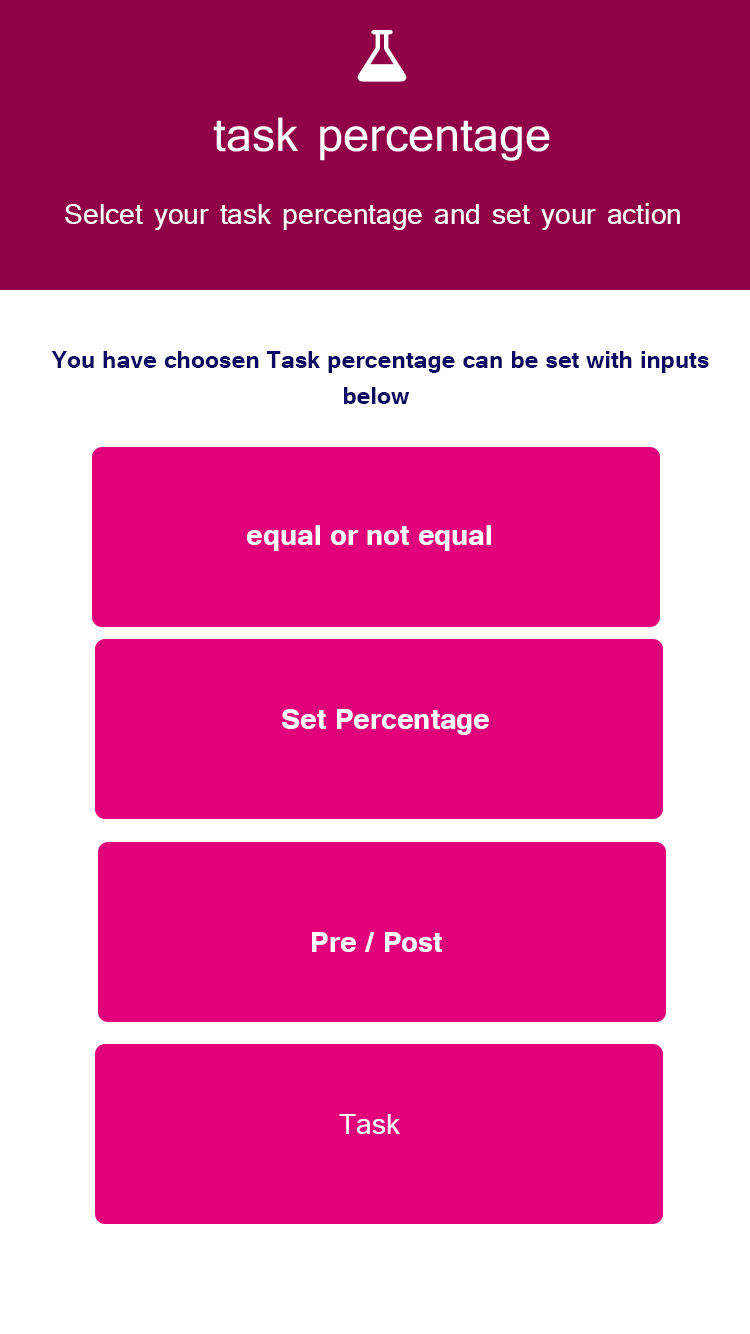
<style>
.page{position:relative;width:750px;height:1334px;background:#e3007b}
.page>*{position:absolute;margin:0}
.t1{font:36px "Tunga";color:#ffffff}
.t2{font:30px "Tunga-Bold";color:#0d0960}
.t3{font:36px "Tunga-Bold";color:#ffffff}
</style>
<div class="page">
<p class="t1" style="left:65px;top:203px;width:615px;height:27px">Selcet your task percentage and set your action</p>
<p class="t2" style="left:51px;top:351px;width:658px;height:53px">You have choosen Task percentage can be set with inputs <br>                                          below</p>
<p class="t3" style="left:247px;top:525px;width:244px;height:26px">equal or not equal</p>
<p class="t3" style="left:282px;top:709px;width:207px;height:26px">Set Percentage</p>
<p class="t3" style="left:312px;top:932px;width:130px;height:20px">Pre / Post</p>
<p class="t1" style="left:339px;top:1114px;width:61px;height:20px">Task</p>
</div>
